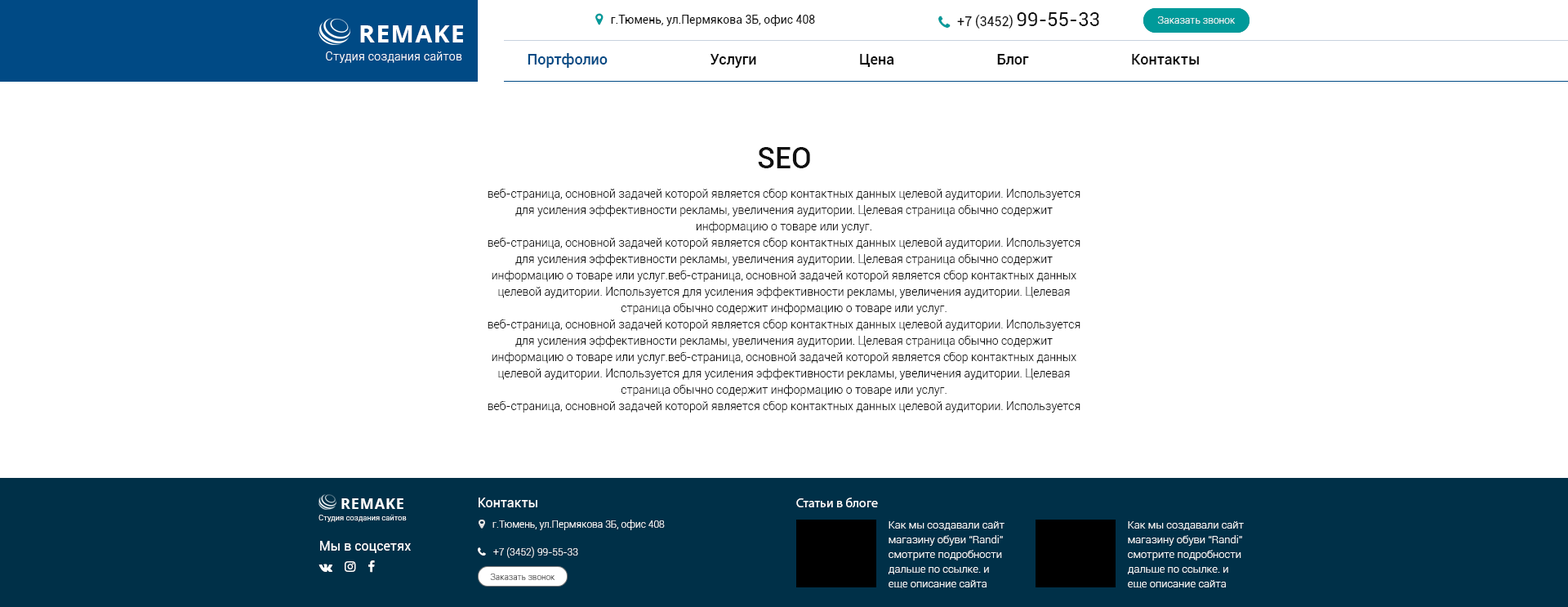
<style>
.page{position:relative;width:1568px;height:607px;background:#ffffff}
.page>*{position:absolute;margin:0}
.t1{font:11.4px "Roboto-Regular";color:#101010}
.t2{font:13.1px "Roboto-Regular";color:#101010;text-transform:uppercase}
.t3{font:19.6px "Roboto-Regular";color:#101010;text-transform:uppercase}
.t4{font:9.8px "Roboto-Light";color:#ffffff}
.t5{font:9.8px "Roboto-Light";color:#fefefe}
.t6{font:24.5px "OpenSans-Bold";letter-spacing:0.05em;color:#ffffff}
.t7{font:11.4px "Roboto-Light";letter-spacing:0.025em;color:#ffffff}
.t8{font:14.7px "Roboto-Medium";color:#101010}
.t9{font:14.7px "Roboto-Medium";color:#004a85}
.t10{font:29.4px "Roboto-Medium";color:#101010}
.t11{font:11.4px/16.3px "Roboto-Light";color:#101010}
.t12{font:13.1px "Roboto-Regular";color:#ffffff}
.t13{font:13.1px "MyriadPro-Regular";color:#ffffff}
.t14{font:14.7px "OpenSans-Bold";letter-spacing:0.05em;color:#ffffff}
.t15{font:7.3px "Roboto-Light";letter-spacing:0.025em;color:#ffffff}
.t16{font:10.6px/14.7px "Roboto-Light";color:#ffffff}
.t17{font:9.8px "Roboto-Light";color:#fffefe;text-transform:uppercase}
.t18{font:8.2px "Roboto-Light"}
</style>
<div class="page">
<p class="t1" style="left:611px;top:15px;width:204px;height:11px">г.Тюмень, ул.Пермякова 3Б, офис 408</p>
<p class="t2" style="left:957px;top:12px;width:142px;height:17px">+7 (3452) <span class="t3">99-55-33</span></p>
<p class="t4" style="left:1157px;top:16px;width:78px;height:8px">Заказать звонок</p>
<p class="t5" style="left:1157px;top:16px;width:78px;height:8px">Заказать звонок</p>
<p class="t6" style="left:360px;top:25px;width:103px;height:17px">REMAKE</p>
<p class="t7" style="left:326px;top:51px;width:136px;height:12px">Студия создания сайтов</p>
<p class="t8" style="left:528px;top:53px;width:671px;height:15px"><span class="t9">Портфолио </span>                           Услуги                            Цена                            Блог                            Контакты</p>
<p class="t10" style="left:758px;top:147px;width:52px;height:21px">SEO</p>
<p class="t11" style="left:488px;top:189px;width:592px;height:223px;text-align:center">веб-страница, основной задачей которой является сбор контактных данных целевой аудитории. Используется для усиления эффективности рекламы, увеличения аудитории. Целевая страница обычно содержит информацию о товаре или услуг.<br>веб-страница, основной задачей которой является сбор контактных данных целевой аудитории. Используется для усиления эффективности рекламы, увеличения аудитории. Целевая страница обычно содержит информацию о товаре или услуг.веб-страница, основной задачей которой является сбор контактных данных целевой аудитории. Используется для усиления эффективности рекламы, увеличения аудитории. Целевая страница обычно содержит информацию о товаре или услуг.<br>веб-страница, основной задачей которой является сбор контактных данных целевой аудитории. Используется для усиления эффективности рекламы, увеличения аудитории. Целевая страница обычно содержит информацию о товаре или услуг.веб-страница, основной задачей которой является сбор контактных данных целевой аудитории. Используется для усиления эффективности рекламы, увеличения аудитории. Целевая страница обычно содержит информацию о товаре или услуг.<br>веб-страница, основной задачей которой является сбор контактных данных целевой аудитории. Используется для усиления эффективности рекламы, увеличения аудитории. Целевая страница обычно содержит информацию о товаре или услуг.</p>
<p class="t12" style="left:479px;top:497px;width:58px;height:10px">Контакты</p>
<p class="t13" style="left:796px;top:497px;width:82px;height:10px">Статьи в блоге</p>
<p class="t14" style="left:341px;top:498px;width:62px;height:11px">REMAKE</p>
<p class="t15" style="left:318px;top:514px;width:89px;height:8px">Студия создания сайтов</p>
<p class="t4" style="left:492px;top:519px;width:173px;height:11px">г.Тюмень, ул.Пермякова 3Б, офис 408</p>
<p class="t16" style="left:889px;top:521px;width:115px;height:67px">Как мы создавали сайт<br>магазину обуви “Randi” смотрите подробности дальше по ссылке. и еще описание сайта</p>
<p class="t16" style="left:1128px;top:521px;width:116px;height:67px">Как мы создавали сайт<br>магазину обуви “Randi” смотрите подробности дальше по ссылке. и еще описание сайта</p>
<p class="t12" style="left:320px;top:541px;width:91px;height:12px">Мы в соцсетях</p>
<p class="t17" style="left:493px;top:546px;width:85px;height:12px">+7 (3452) 99-55-33</p>
<p class="t18" style="left:490px;top:573px;width:65px;height:7px">Заказать звонок</p>
</div>
